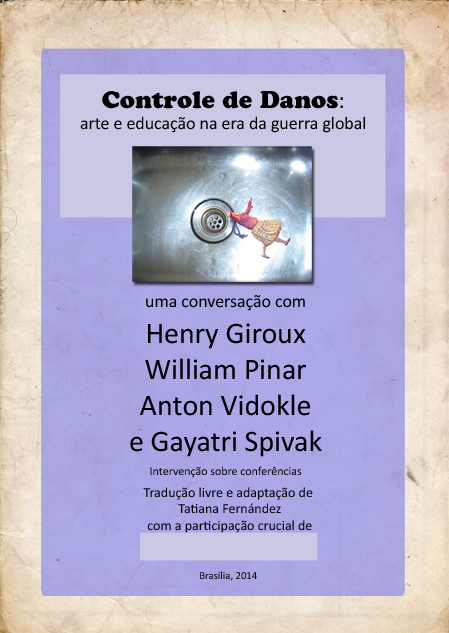
<style>
.page{position:relative;width:449px;height:633px}
.page>*{position:absolute;margin:0}
.t1{font:17.9px "Calibri";color:#000000}
.t2{font:24px "CooperBlackStd";color:#000000}
.t3{font:24px "Calibri";color:#000000}
.t4{font:30px "Calibri";color:#000000}
.t5{font:12px "Calibri";color:#000000}
.t6{font:14px "Calibri";color:#000000}
.t7{font:10.7px "Calibri";color:#000000}
</style>
<div class="page">
<p class="t1" style="left:80px;top:91px;width:285px;height:42px;text-align:center"><span class="t2">Controle de Danos</span><span class="t3">:<br></span>arte e educação na era da guerra global</p>
<p class="t4" style="left:130px;top:295px;width:192px;height:162px;text-align:center"><span class="t1">uma conversação com<br></span>Henry Giroux<br>William Pinar<br>Anton Vidokle<br>e Gayatri Spivak</p>
<p class="t5" style="left:150px;top:466px;width:152px;height:12px">Intervenção sobre conferências</p>
<p class="t6" style="left:143px;top:487px;width:170px;height:46px;text-align:center">Tradução livre e adaptação de <br>Tatiana Fernández<br>com a participação crucial de</p>
<p class="t7" style="left:200px;top:571px;width:57px;height:10px">Brasília, 2014</p>
</div>
